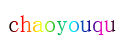
<style>
.page{position:relative;width:126px;height:50px;background:#ffffff}
.page>*{position:absolute;margin:0}
.t1{font:24px "SimSun"}
</style>
<div class="page">
<p class="t1" style="left:9px;top:15px;width:107px;height:20px">chaoyouqu</p>
</div>
